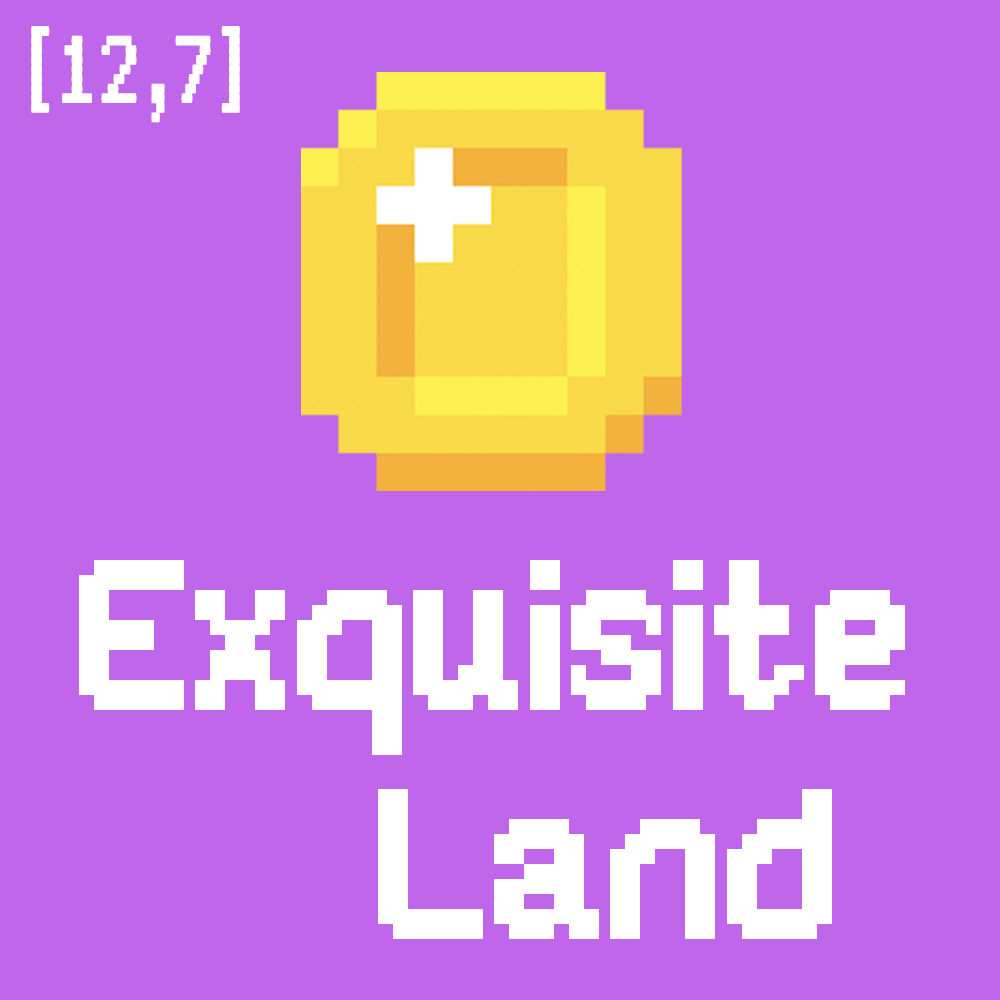
<style>
.page{position:relative;width:1000px;height:1000px;background:#c066ea}
.page>*{position:absolute;margin:0}
.t1{font:120px "VT323-Regular";color:#ffffff}
.t2{font:240px/229px "Jaunt";color:#ffffff}
</style>
<div class="page">
<p class="t1" style="left:31px;top:26px;width:209px;height:97px">[12,7]</p>
<p class="t2" style="left:79px;top:560px;width:826px;height:379px;text-align:center">Exquisite<br>   Land</p>
</div>
